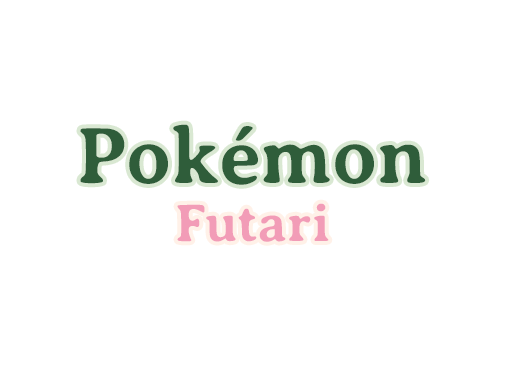
<style>
.page{position:relative;width:512px;height:384px;background:#ffffff}
.page>*{position:absolute;margin:0}
.t1{font:80px "AveriaSerifLibre-Bold";color:#2f5d3a}
.t2{font:53.3px "AveriaSerifLibre-Bold";color:#f29cb7}
</style>
<div class="page">
<p class="t1" style="left:80px;top:124px;width:346px;height:61px">Pokémon</p>
<p class="t2" style="left:177px;top:203px;width:152px;height:39px">Futari</p>
</div>
